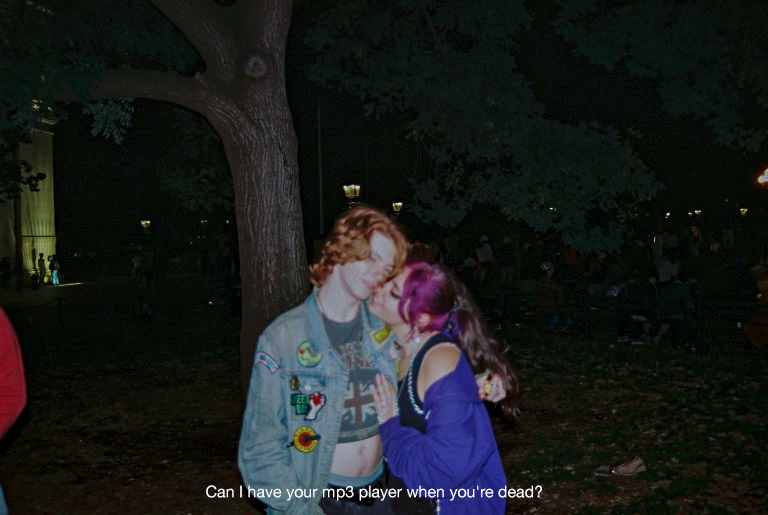
<style>
.page{position:relative;width:768px;height:515px}
.page>*{position:absolute;margin:0}
.t1{font:16px "HelveticaNeue";color:#ffffff}
</style>
<div class="page">
<p class="t1" style="left:206px;top:485px;width:336px;height:16px">Can I have your mp3 player when you're dead?</p>
</div>
